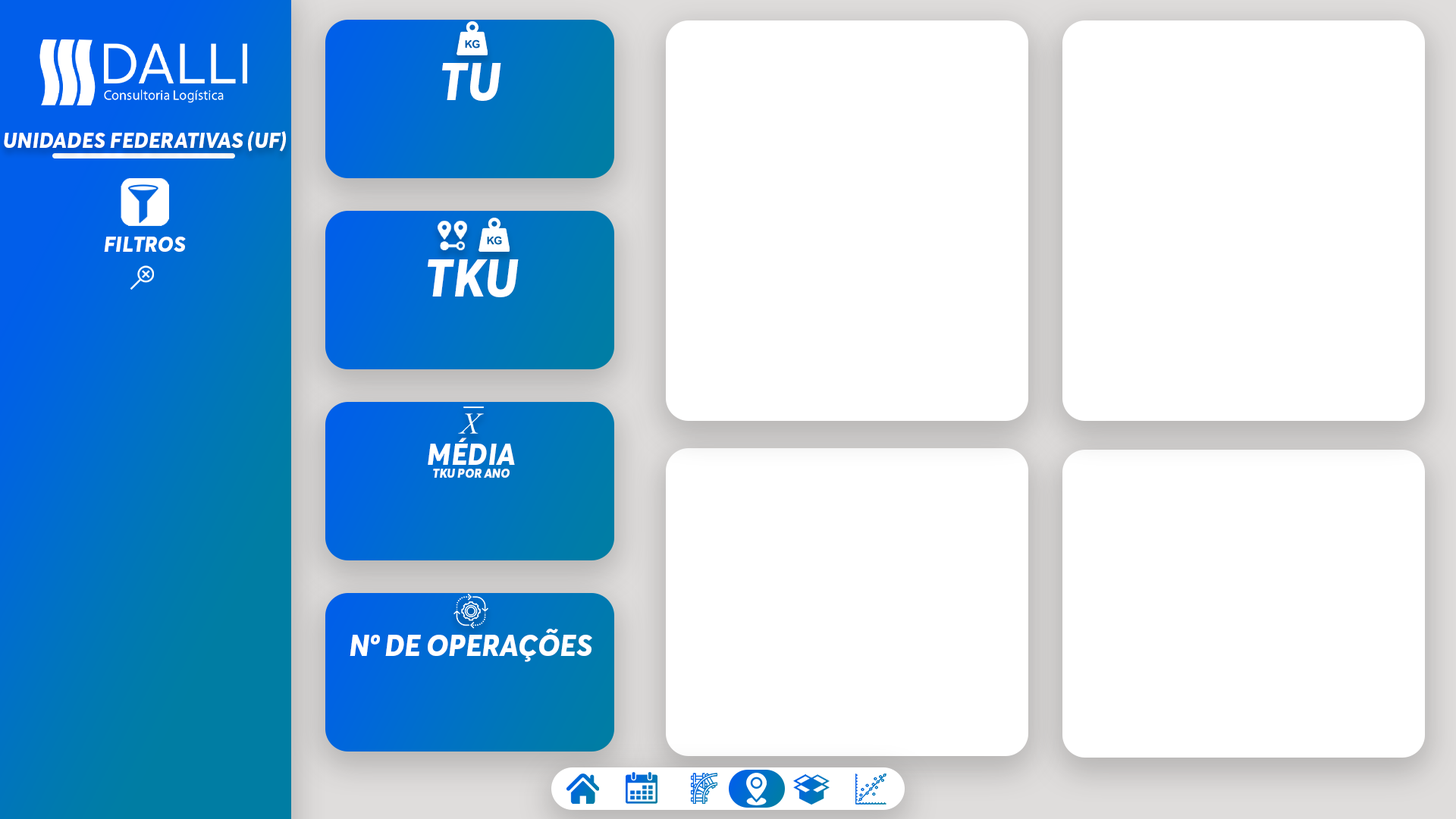
<style>
.page{position:relative;width:1456px;height:819px;background:#ffffff}
.page>*{position:absolute;margin:0}
.t1{font:52.1px "AvertaDemoPE-ExtraboldItalic";color:#ffffff;text-transform:uppercase}
.t2{font:22.1px "AvertaDemoPE-ExtraboldItalic";color:#ffffff;text-transform:uppercase}
.t3{font:12.6px/12.6px "AvertaDemoPE-ExtraboldItalic";color:#ffffff;text-transform:uppercase}
.t4{font:30px/12.6px "AvertaDemoPE-ExtraboldItalic";color:#ffffff;text-transform:uppercase}
.t5{font:30px/12.6px "AvertaDemoPE-ExtraboldItalic";color:#ffffff}
.t6{font:30px "AvertaDemoPE-ExtraboldItalic";color:#ffffff;text-transform:uppercase}
</style>
<div class="page">
<p class="t1" style="left:442px;top:63px;width:59px;height:38px">tu</p>
<p class="t2" style="left:4px;top:131px;width:282px;height:21px">UNIDADES FEDERATIVAS (UF)</p>
<p class="t2" style="left:104px;top:237px;width:82px;height:15px">filtros</p>
<p class="t1" style="left:428px;top:259px;width:91px;height:38px">tku</p>
<p class="t3" style="left:428px;top:438px;width:87px;height:40px;text-align:center"><span class="t4">méd</span><span class="t5">I</span><span class="t4">a<br></span>TKU por ano</p>
<p class="t6" style="left:350px;top:629px;width:242px;height:33px">nº de operações</p>
</div>
